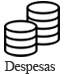
<style>
.page{position:relative;width:64px;height:74px;background:#ffffff}
.page>*{position:absolute;margin:0}
.t1{font:13.5px "TimesNewRomanPSMT";color:#333333}
</style>
<div class="page">
<p class="t1" style="left:4px;top:61px;width:51px;height:13px">Despesas</p>
</div>
